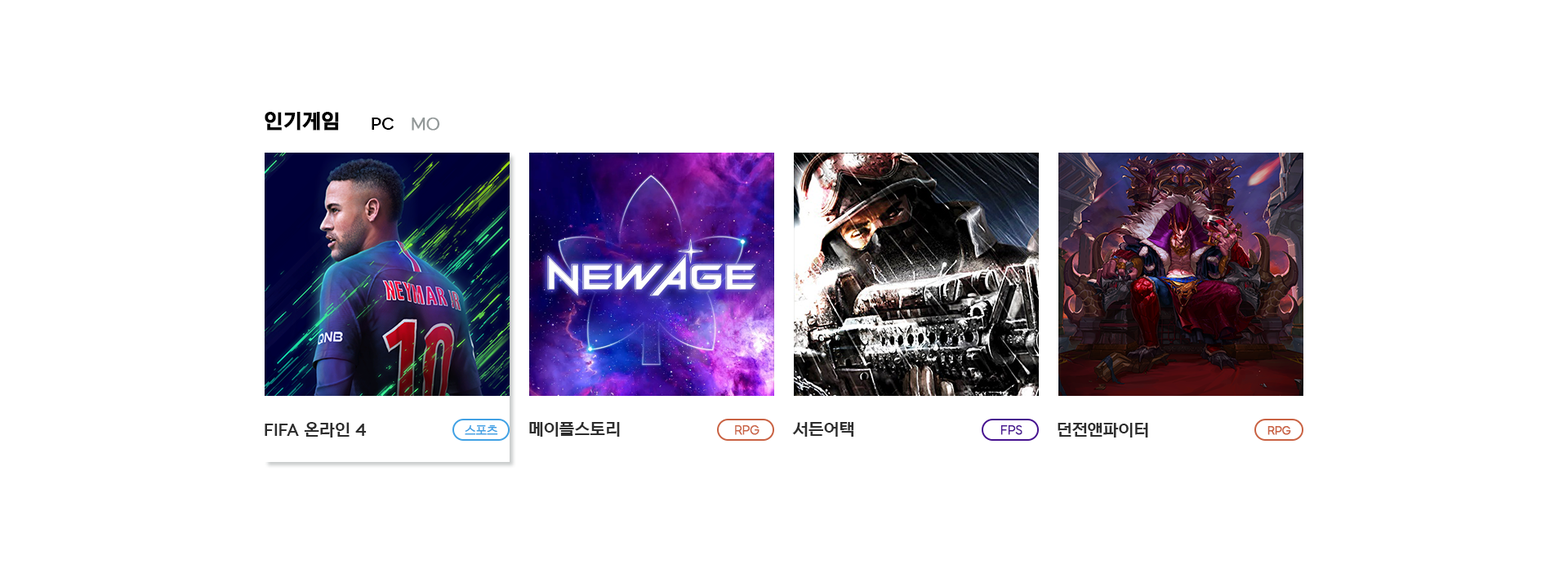
<style>
.page{position:relative;width:1568px;height:573px;background:#ffffff}
.page>*{position:absolute;margin:0}
.t1{font:19.6px "NEXONLv1GothicBold";color:#000000;font-weight:bold}
.t2{font:16.3px "NEXONLv1GothicBold";color:#000000}
.t3{font:16.3px "NEXONLv1GothicRegular";color:#929898;font-weight:bold}
.t4{font:16.3px "NEXONLv1GothicBold";color:#2d2d2d}
.t5{font:11.4px "NEXONLv1GothicRegular";color:#41a1e4;font-weight:bold}
.t6{font:11.4px "NEXONLv1GothicRegular";color:#c96243;font-weight:bold}
.t7{font:11.4px "NEXONLv1GothicRegular";color:#46128f;font-weight:bold}
.t8{font:10.6px "NEXONLv1GothicRegular";color:#c96243;font-weight:bold}
</style>
<div class="page">
<p class="t1" style="left:265px;top:112px;width:74px;height:19px">인기게임</p>
<p class="t2" style="left:372px;top:118px;width:22px;height:12px">PC</p>
<p class="t3" style="left:412px;top:118px;width:28px;height:13px">MO</p>
<p class="t4" style="left:265px;top:422px;width:102px;height:16px">FIFA 온라인 4</p>
<p class="t5" style="left:465px;top:425px;width:33px;height:10px">스포츠</p>
<p class="t4" style="left:529px;top:422px;width:91px;height:15px">메이플스토리</p>
<p class="t6" style="left:735px;top:425px;width:25px;height:10px">RPG</p>
<p class="t4" style="left:792px;top:422px;width:61px;height:15px">서든어택</p>
<p class="t7" style="left:1000px;top:425px;width:22px;height:10px">FPS</p>
<p class="t4" style="left:1058px;top:423px;width:90px;height:15px">던전앤파이터</p>
<p class="t8" style="left:1267px;top:426px;width:24px;height:9px">RPG</p>
</div>
